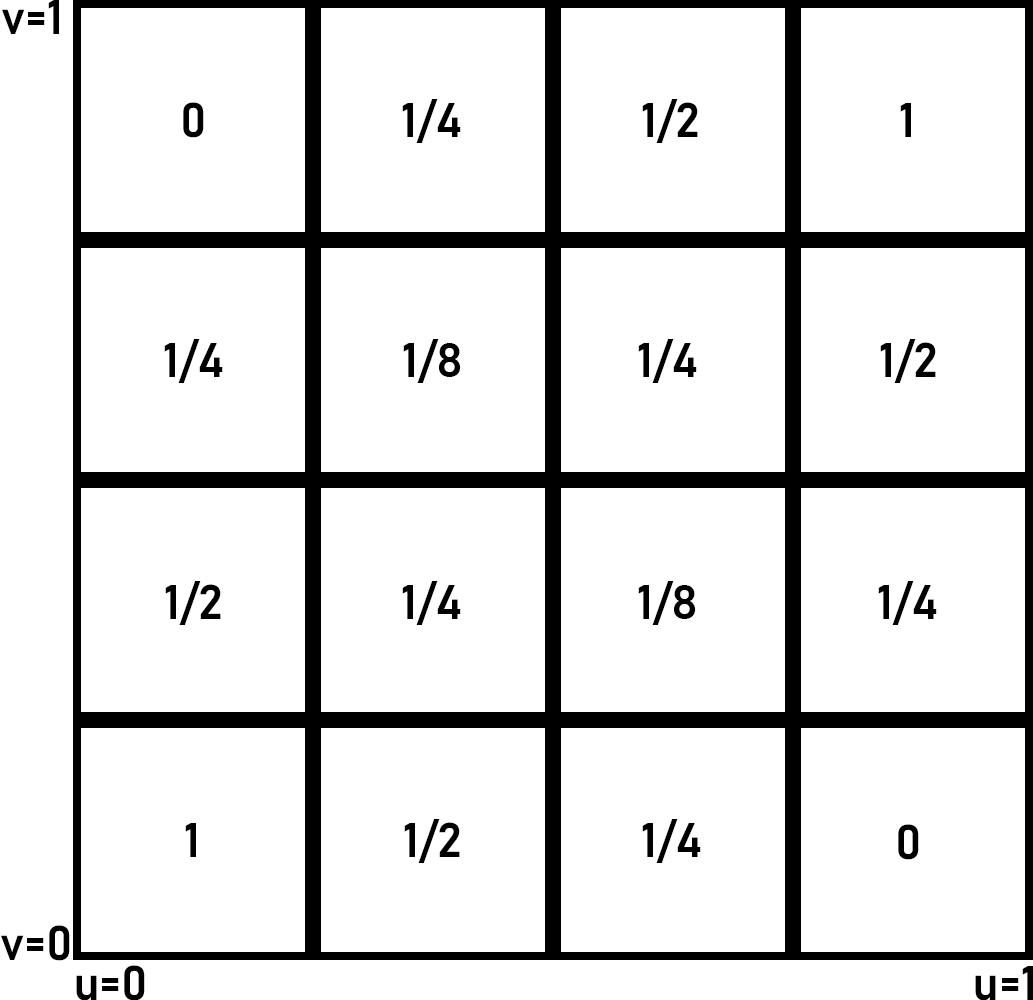
<style>
.page{position:relative;width:1033px;height:1000px;background:#ffffff}
.page>*{position:absolute;margin:0}
.t1{font:48px "Bahnschrift-SemiBold";color:#000000}
</style>
<div class="page">
<p class="t1" style="left:2px;top:0px;width:57px;height:34px">v=1</p>
<p class="t1" style="left:183px;top:102px;width:21px;height:36px">0</p>
<p class="t1" style="left:402px;top:99px;width:59px;height:44px">1/4</p>
<p class="t1" style="left:642px;top:99px;width:56px;height:44px">1/2</p>
<p class="t1" style="left:900px;top:103px;width:11px;height:34px">1</p>
<p class="t1" style="left:164px;top:339px;width:59px;height:44px">1/4</p>
<p class="t1" style="left:403px;top:339px;width:58px;height:44px">1/8</p>
<p class="t1" style="left:638px;top:339px;width:59px;height:44px">1/4</p>
<p class="t1" style="left:880px;top:339px;width:56px;height:44px">1/2</p>
<p class="t1" style="left:165px;top:581px;width:56px;height:44px">1/2</p>
<p class="t1" style="left:402px;top:581px;width:59px;height:44px">1/4</p>
<p class="t1" style="left:638px;top:581px;width:58px;height:44px">1/8</p>
<p class="t1" style="left:878px;top:581px;width:59px;height:44px">1/4</p>
<p class="t1" style="left:404px;top:819px;width:56px;height:44px">1/2</p>
<p class="t1" style="left:642px;top:819px;width:59px;height:44px">1/4</p>
<p class="t1" style="left:185px;top:823px;width:11px;height:34px">1</p>
<p class="t1" style="left:898px;top:824px;width:21px;height:36px">0</p>
<p class="t1" style="left:1px;top:925px;width:69px;height:36px">v=0</p>
<p class="t1" style="left:76px;top:965px;width:69px;height:36px">u=0</p>
<p class="t1" style="left:975px;top:966px;width:58px;height:35px">u=1</p>
</div>
